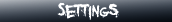
<style>
.page{position:relative;width:172px;height:22px}
.page>*{position:absolute;margin:0}
.t1{font:25px "YouMurdererBB";color:#ffffff}
</style>
<div class="page">
<p class="t1" style="left:57px;top:2px;width:62px;height:18px">Settings</p>
</div>
